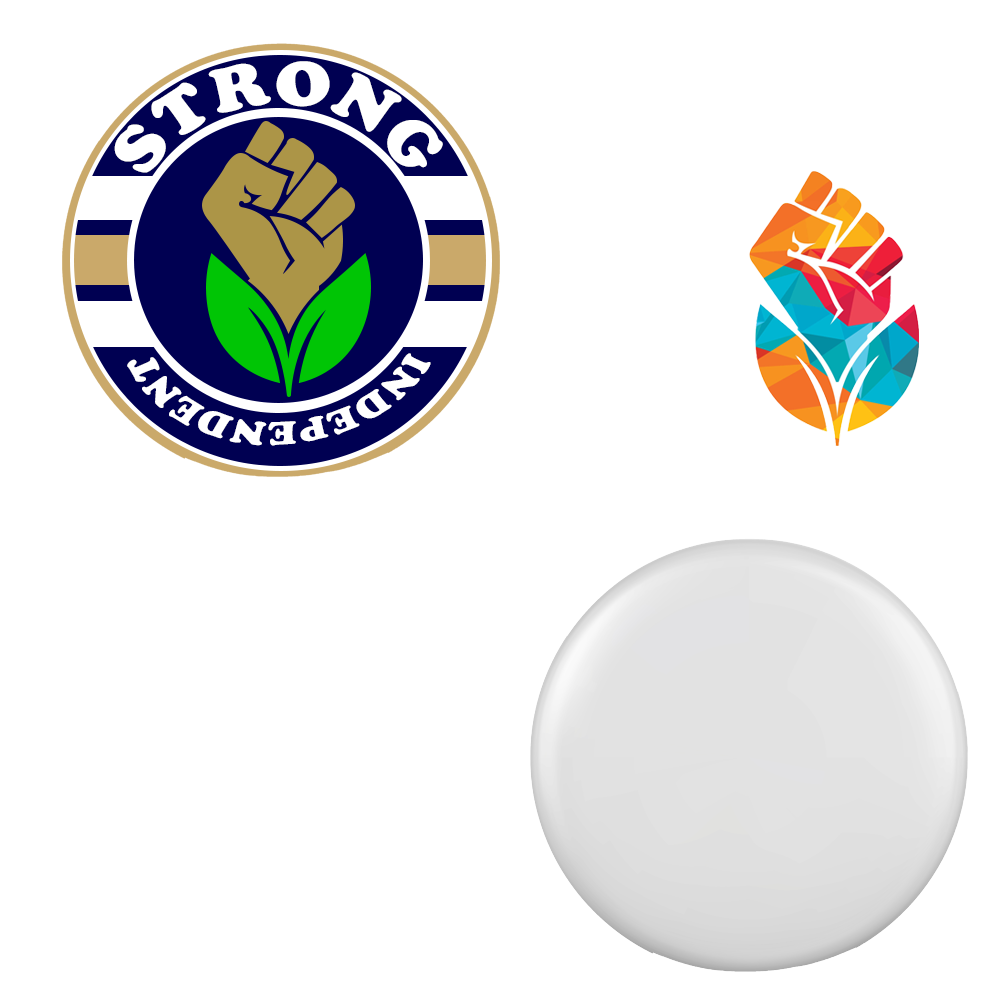
<style>
.page{position:relative;width:1000px;height:1000px;background:#ffffff}
.page>*{position:absolute;margin:0}
.t1{font:70.7px "CooperBlack";color:#ffffff;scale:0.95 1}
.t2{font:34.2px "CooperBlack";color:#ffffff;scale:1.19 1}
</style>
<div class="page">
<p class="t1" style="left:114px;top:61px;width:329px;height:112px;rotate:44deg">STRONG</p>
<p class="t2" style="left:127px;top:353px;width:304px;height:93px;rotate:-22deg">INDEPENDENT</p>
</div>
